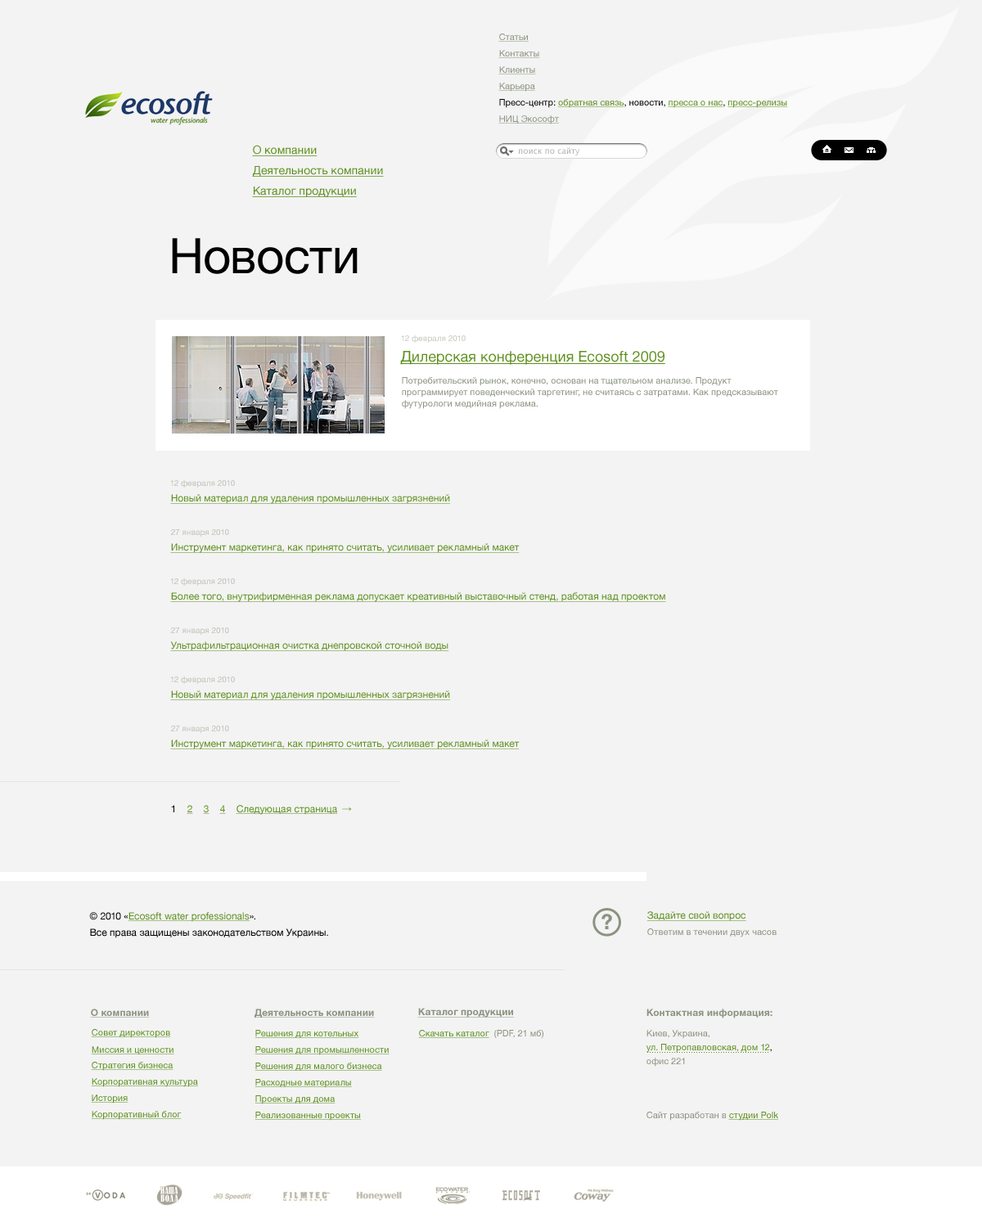
<style>
.page{position:relative;width:982px;height:1227px;background:#f3f3f3}
.page>*{position:absolute;margin:0}
.t1{font:9px "HelveticaNeue";color:#8b9380;text-decoration:underline}
.t2{font:9px "HelveticaNeue";color:#5e901f;text-decoration:underline}
.t3{font:9px "HelveticaNeue";color:#000000}
.t4{font:9px "HelveticaNeue";color:#010101}
.t5{font:11.5px "HelveticaNeue";color:#5e901f;text-decoration:underline}
.t6{font:8.2px "LucidaGrande";color:#b2b2b2}
.t7{font:49.1px "HelveticaNeue";color:#000000}
.t8{font:8.2px "HelveticaNeue";color:#c5c9bf}
.t9{font:14.7px "HelveticaNeue";color:#5e901f;text-decoration:underline}
.t10{font:9px/11.5px "HelveticaNeue";color:#8b9380}
.t11{font:8.2px "HelveticaNeue";color:#bfc3b9}
.t12{font:9.8px "HelveticaNeue";color:#5e901f;text-decoration:underline}
.t13{font:9.8px "HelveticaNeue";color:#000000}
.t14{font:9.8px "HelveticaNeue";text-decoration:underline}
.t15{font:9.8px "ArialMT"}
.t16{font:9.8px/16.4px "HelveticaNeue";color:#000000}
.t17{font:9.8px/16.4px "HelveticaNeue";color:#5e901f;text-decoration:underline}
.t18{font:9px "HelveticaNeue";color:#8b9380}
.t19{font:9.8px "HelveticaNeue-Bold";color:#8b9380;text-decoration:underline}
.t20{font:9px/13.9px "HelveticaNeue";color:#5e901f}
.t21{font:9.8px/16.4px "HelveticaNeue-Bold";color:#8b9380}
.t22{font:9px/20.5px "HelveticaNeue";color:#8b9380}
.t23{font:9px/13.9px "HelveticaNeue";color:#000000}
.t24{font:9px/13.9px "HelveticaNeue";color:#8b9380}
</style>
<div class="page">
<p class="t1" style="left:498px;top:34px;width:31px;height:8px">Статьи</p>
<p class="t1" style="left:498px;top:50px;width:42px;height:8px">Контакты</p>
<p class="t1" style="left:498px;top:66px;width:38px;height:8px">Клиенты</p>
<p class="t1" style="left:498px;top:83px;width:37px;height:9px">Карьера</p>
<p class="t2" style="left:499px;top:99px;width:289px;height:9px"><span class="t3">Пресс-центр: </span>обратная связь<span class="t3">, новости, </span>пресса о нас<span class="t4">, </span>пресс-релизы</p>
<p class="t1" style="left:498px;top:115px;width:61px;height:9px">НИЦ Экософт</p>
<p class="t5" style="left:252px;top:145px;width:65px;height:11px">О компании</p>
<p class="t6" style="left:519px;top:147px;width:61px;height:8px">поиск по сайту</p>
<p class="t5" style="left:252px;top:166px;width:132px;height:11px">Деятельность компании</p>
<p class="t5" style="left:252px;top:187px;width:105px;height:10px">Каталог продукции</p>
<p class="t7" style="left:172px;top:238px;width:186px;height:36px">Новости</p>
<p class="t8" style="left:401px;top:335px;width:65px;height:8px">12 февраля 2010</p>
<p class="t9" style="left:400px;top:351px;width:265px;height:14px">Дилерская конференция Ecosoft 2009</p>
<p class="t10" style="left:402px;top:377px;width:376px;height:32px">Потребительский рынок, конечно, основан на тщательном анализе. Продукт программирует поведенческий таргетинг, не считаясь с затратами. Как предсказывают футурологи медийная реклама.</p>
<p class="t11" style="left:170px;top:479px;width:65px;height:9px">12 февраля 2010</p>
<p class="t12" style="left:170px;top:494px;width:280px;height:10px">Новый материал для удаления промышленных загрязнений</p>
<p class="t11" style="left:171px;top:529px;width:58px;height:8px">27 января 2010</p>
<p class="t12" style="left:170px;top:543px;width:350px;height:10px">Инструмент маркетинга, как принято считать, усиливает рекламный макет</p>
<p class="t11" style="left:170px;top:578px;width:65px;height:8px">12 февраля 2010</p>
<p class="t12" style="left:170px;top:592px;width:496px;height:10px">Более того, внутрифирменная реклама допускает креативный выставочный стенд, работая над проектом</p>
<p class="t11" style="left:171px;top:628px;width:58px;height:7px">27 января 2010</p>
<p class="t12" style="left:170px;top:641px;width:279px;height:10px">Ультрафильтрационная очистка днепровской сточной воды</p>
<p class="t11" style="left:170px;top:676px;width:65px;height:8px">12 февраля 2010</p>
<p class="t12" style="left:170px;top:691px;width:280px;height:9px">Новый материал для удаления промышленных загрязнений</p>
<p class="t11" style="left:171px;top:726px;width:58px;height:7px">27 января 2010</p>
<p class="t12" style="left:170px;top:740px;width:350px;height:9px">Инструмент маркетинга, как принято считать, усиливает рекламный макет</p>
<p class="t13" style="left:171px;top:805px;width:3px;height:7px">1</p>
<p class="t12" style="left:187px;top:805px;width:6px;height:9px">2</p>
<p class="t14" style="left:203px;top:805px;width:6px;height:9px">3</p>
<p class="t12" style="left:219px;top:805px;width:7px;height:9px">4</p>
<p class="t12" style="left:236px;top:805px;width:102px;height:10px">Следующая страница</p>
<p class="t15" style="left:342px;top:807px;width:10px;height:4px">→</p>
<p class="t16" style="left:89px;top:912px;width:239px;height:26px">© 2010 «<span class="t17">Ecosoft water professionals</span>».<br>Все права защищены законодательством Украины.</p>
<p class="t12" style="left:646px;top:911px;width:100px;height:10px">Задайте свой вопрос</p>
<p class="t18" style="left:647px;top:929px;width:129px;height:9px">Ответим в течении двух часов</p>
<p class="t19" style="left:90px;top:1009px;width:60px;height:9px">О компании</p>
<p class="t19" style="left:254px;top:1009px;width:121px;height:9px">Деятельность компании</p>
<p class="t19" style="left:417px;top:1008px;width:97px;height:10px">Каталог продукции</p>
<p class="t20" style="left:646px;top:1009px;width:126px;height:58px"><span class="t21">Контактная информация:<br></span><span class="t22">Киев, Украина,<br></span>ул. Петропавловская, дом 12<span class="t23">,<br></span><span class="t24">офис 221</span></p>
<p class="t2" style="left:91px;top:1029px;width:80px;height:9px">Совет директоров</p>
<p class="t2" style="left:254px;top:1030px;width:105px;height:8px">Решения для котельных</p>
<p class="t2" style="left:418px;top:1030px;width:71px;height:8px">Скачать каталог</p>
<p class="t18" style="left:494px;top:1030px;width:49px;height:9px">(PDF, 21 мб)</p>
<p class="t2" style="left:91px;top:1046px;width:83px;height:9px">Миссия и ценности</p>
<p class="t2" style="left:254px;top:1046px;width:135px;height:9px">Решения для промышленности</p>
<p class="t2" style="left:91px;top:1062px;width:82px;height:9px">Стратегия бизнеса</p>
<p class="t2" style="left:254px;top:1063px;width:128px;height:8px">Решения для малого бизнеса</p>
<p class="t2" style="left:91px;top:1078px;width:107px;height:9px">Корпоративная культура</p>
<p class="t2" style="left:254px;top:1079px;width:98px;height:9px">Расходные материалы</p>
<p class="t2" style="left:91px;top:1095px;width:37px;height:9px">История</p>
<p class="t2" style="left:254px;top:1096px;width:81px;height:9px">Проекты для дома</p>
<p class="t2" style="left:91px;top:1111px;width:91px;height:9px">Корпоративный блог</p>
<p class="t2" style="left:254px;top:1112px;width:107px;height:9px">Реализованные проекты</p>
<p class="t18" style="left:646px;top:1112px;width:132px;height:9px">Сайт разработан в <span class="t2">студии Polk</span></p>
</div>
